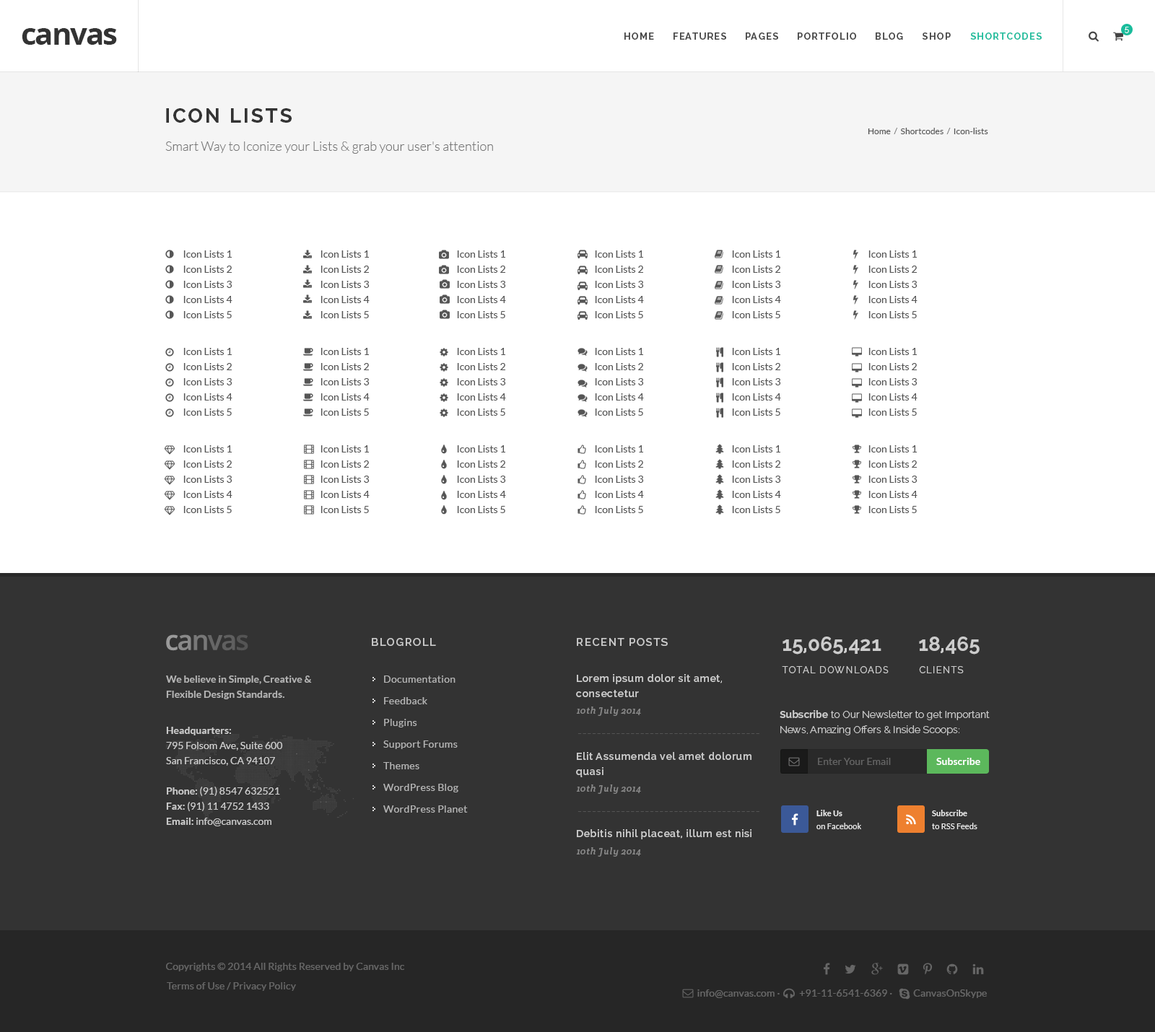
<style>
.page{position:relative;width:1155px;height:1032px;background:#ffffff}
.page>*{position:absolute;margin:0}
.t1{font:30.3px "OpenSans-Bold";letter-spacing:-0.05em;color:#333333}
.t2{font:7.9px "Raleway-Light";letter-spacing:0.1em;color:#ffffff}
.t3{font:9.4px "Raleway-Bold";letter-spacing:0.1em;color:#444444}
.t4{font:9.4px "Raleway-Bold";letter-spacing:0.1em;color:#1abc9c}
.t5{font:20.2px "Raleway-Bold";letter-spacing:0.1em;color:#333333}
.t6{font:8.7px "Lato-Regular";color:#555555}
.t7{font:8.7px "Lato-Regular";color:#777777}
.t8{font:13px "Lato-Light";color:#777777}
.t9{font:10.1px/15.2px "Lato-Regular";color:#555555}
.t10{font:10.8px "Raleway-SemiBold";letter-spacing:0.1em;color:#cccccc}
.t11{font:20.2px "Raleway-Bold";color:#cccccc}
.t12{font:10.1px/15.2px "Lato-Bold";color:#cccccc}
.t13{font:10.1px/21.7px "Lato-Regular";letter-spacing:0.025em;color:#cccccc}
.t14{font:10.1px/15.2px "Raleway-SemiBold";letter-spacing:0.05em;color:#cccccc}
.t15{font:9.4px "Raleway-Regular";letter-spacing:0.1em;color:#cacaca;text-transform:uppercase}
.t16{font:9.4px "CreteRound-Italic";letter-spacing:0.05em;color:#888888}
.t17{font:10.1px/15.2px "Raleway-Light";color:#cccccc}
.t18{font:10.1px/15.2px "Raleway-Bold";color:#cccccc}
.t19{font:10.1px/15.2px "Lato-Regular";color:#cccccc}
.t20{font:13px "Lato-Italic";letter-spacing:0.05em;color:#545454}
.t21{font:10.1px "Lato-Regular";color:#777777}
.t22{font:10.1px "Lato-Bold";color:#ffffff}
.t23{font:7.9px/13px "Lato-Regular";letter-spacing:0.01em;color:#eeeeee}
.t24{font:7.9px/13px "Lato-Bold";letter-spacing:0.01em;color:#eeeeee}
.t25{font:10.1px "Raleway-SemiBold";letter-spacing:0.05em;color:#cccccc}
.t26{font:10.1px "Lato-Regular";letter-spacing:0.01em;color:#666666}
</style>
<div class="page">
<p class="t1" style="left:22px;top:28px;width:95px;height:17px">canvas</p>
<p class="t2" style="left:1125px;top:27px;width:4px;height:6px">5</p>
<p class="t3" style="left:624px;top:32px;width:30px;height:8px">HOME</p>
<p class="t3" style="left:674px;top:32px;width:52px;height:8px">FEATURES</p>
<p class="t3" style="left:746px;top:32px;width:32px;height:8px">PAGES</p>
<p class="t3" style="left:798px;top:32px;width:58px;height:8px">PORTFOLIO</p>
<p class="t3" style="left:876px;top:32px;width:27px;height:8px">BLOG</p>
<p class="t3" style="left:923px;top:32px;width:28px;height:8px">SHOP</p>
<p class="t4" style="left:970px;top:32px;width:72px;height:8px">SHORTCODES</p>
<p class="t5" style="left:166px;top:108px;width:126px;height:15px">ICON LISTS</p>
<p class="t6" style="left:868px;top:128px;width:120px;height:6px">Home  <span class="t7">/ </span> Shortcodes  <span class="t7">/ </span> Icon-lists</p>
<p class="t8" style="left:165px;top:141px;width:328px;height:13px">Smart Way to Iconize your Lists &amp; grab your user's attention</p>
<p class="t9" style="left:183px;top:251px;width:49px;height:67px">Icon Lists 1<br>Icon Lists 2<br>Icon Lists 3<br>Icon Lists 4<br>Icon Lists 5</p>
<p class="t9" style="left:321px;top:251px;width:49px;height:67px">Icon Lists 1<br>Icon Lists 2<br>Icon Lists 3<br>Icon Lists 4<br>Icon Lists 5</p>
<p class="t9" style="left:457px;top:251px;width:49px;height:67px">Icon Lists 1<br>Icon Lists 2<br>Icon Lists 3<br>Icon Lists 4<br>Icon Lists 5</p>
<p class="t9" style="left:595px;top:251px;width:49px;height:67px">Icon Lists 1<br>Icon Lists 2<br>Icon Lists 3<br>Icon Lists 4<br>Icon Lists 5</p>
<p class="t9" style="left:732px;top:251px;width:49px;height:67px">Icon Lists 1<br>Icon Lists 2<br>Icon Lists 3<br>Icon Lists 4<br>Icon Lists 5</p>
<p class="t9" style="left:868px;top:251px;width:50px;height:67px">Icon Lists 1<br>Icon Lists 2<br>Icon Lists 3<br>Icon Lists 4<br>Icon Lists 5</p>
<p class="t9" style="left:183px;top:348px;width:49px;height:68px">Icon Lists 1<br>Icon Lists 2<br>Icon Lists 3<br>Icon Lists 4<br>Icon Lists 5</p>
<p class="t9" style="left:321px;top:348px;width:49px;height:68px">Icon Lists 1<br>Icon Lists 2<br>Icon Lists 3<br>Icon Lists 4<br>Icon Lists 5</p>
<p class="t9" style="left:457px;top:348px;width:49px;height:68px">Icon Lists 1<br>Icon Lists 2<br>Icon Lists 3<br>Icon Lists 4<br>Icon Lists 5</p>
<p class="t9" style="left:595px;top:348px;width:49px;height:68px">Icon Lists 1<br>Icon Lists 2<br>Icon Lists 3<br>Icon Lists 4<br>Icon Lists 5</p>
<p class="t9" style="left:732px;top:348px;width:49px;height:68px">Icon Lists 1<br>Icon Lists 2<br>Icon Lists 3<br>Icon Lists 4<br>Icon Lists 5</p>
<p class="t9" style="left:868px;top:348px;width:50px;height:68px">Icon Lists 1<br>Icon Lists 2<br>Icon Lists 3<br>Icon Lists 4<br>Icon Lists 5</p>
<p class="t9" style="left:183px;top:445px;width:49px;height:68px">Icon Lists 1<br>Icon Lists 2<br>Icon Lists 3<br>Icon Lists 4<br>Icon Lists 5</p>
<p class="t9" style="left:321px;top:445px;width:49px;height:68px">Icon Lists 1<br>Icon Lists 2<br>Icon Lists 3<br>Icon Lists 4<br>Icon Lists 5</p>
<p class="t9" style="left:457px;top:445px;width:49px;height:68px">Icon Lists 1<br>Icon Lists 2<br>Icon Lists 3<br>Icon Lists 4<br>Icon Lists 5</p>
<p class="t9" style="left:595px;top:445px;width:49px;height:68px">Icon Lists 1<br>Icon Lists 2<br>Icon Lists 3<br>Icon Lists 4<br>Icon Lists 5</p>
<p class="t9" style="left:732px;top:445px;width:49px;height:68px">Icon Lists 1<br>Icon Lists 2<br>Icon Lists 3<br>Icon Lists 4<br>Icon Lists 5</p>
<p class="t9" style="left:868px;top:445px;width:50px;height:68px">Icon Lists 1<br>Icon Lists 2<br>Icon Lists 3<br>Icon Lists 4<br>Icon Lists 5</p>
<p class="t10" style="left:372px;top:638px;width:64px;height:8px">BLOGROLL</p>
<p class="t10" style="left:577px;top:638px;width:91px;height:8px">RECENT POSTS</p>
<p class="t11" style="left:783px;top:637px;width:98px;height:18px">15,065,421</p>
<p class="t11" style="left:919px;top:637px;width:61px;height:18px">18,465</p>
<p class="t12" style="left:166px;top:676px;width:146px;height:24px;opacity:0.8">We believe in Simple, Creative &amp;<br>Flexible Design Standards.</p>
<p class="t13" style="left:383px;top:676px;width:85px;height:137px;opacity:0.8">Documentation<br>Feedback<br>Plugins<br>Support Forums<br>Themes<br>WordPress Blog<br>WordPress Planet</p>
<p class="t14" style="left:576px;top:674px;width:146px;height:23px">Lorem ipsum dolor sit amet,<br>consectetur</p>
<p class="t15" style="left:782px;top:666px;width:107px;height:8px">TOTAL Downloads</p>
<p class="t15" style="left:919px;top:666px;width:45px;height:8px">CLIENTS</p>
<p class="t16" style="left:576px;top:707px;width:65px;height:9px">10th July 2014</p>
<p class="t17" style="left:780px;top:710px;width:210px;height:26px"><span class="t18">Subscribe</span> to Our Newsletter to get Important<br>News, Amazing Offers &amp; Inside Scoops:</p>
<p class="t19" style="left:166px;top:727px;width:117px;height:100px"><span class="t12">Headquarters:<br></span>795 Folsom Ave, Suite 600<br>San Francisco, CA 94107<br><span class="t12"><br>Phone: </span>(91) 8547 632521<br><span class="t12">Fax: </span>(91) 11 4752 1433<br><span class="t12">Email: </span>info@canvas.com</p>
<p class="t20" style="left:578px;top:733px;width:181px;height:1px">--------------------------------------</p>
<p class="t14" style="left:576px;top:752px;width:176px;height:26px">Elit Assumenda vel amet dolorum<br>quasi</p>
<p class="t21" style="left:818px;top:758px;width:73px;height:7px;opacity:0.7">Enter Your Email</p>
<p class="t22" style="left:936px;top:758px;width:44px;height:7px">Subscribe</p>
<p class="t16" style="left:576px;top:785px;width:65px;height:9px">10th July 2014</p>
<p class="t23" style="left:816px;top:810px;width:45px;height:19px"><span class="t24">Like Us<br></span>on Facebook</p>
<p class="t23" style="left:932px;top:810px;width:45px;height:19px"><span class="t24">Subscribe<br></span>to RSS Feeds</p>
<p class="t20" style="left:578px;top:811px;width:181px;height:1px">--------------------------------------</p>
<p class="t25" style="left:577px;top:829px;width:175px;height:11px">Debitis nihil placeat, illum est nisi</p>
<p class="t16" style="left:576px;top:848px;width:65px;height:9px">10th July 2014</p>
<p class="t26" style="left:166px;top:963px;width:238px;height:9px">Copyrights © 2014 All Rights Reserved by Canvas Inc</p>
<p class="t26" style="left:167px;top:983px;width:129px;height:8px">Terms of Use / Privacy Policy</p>
<p class="t26" style="left:697px;top:990px;width:290px;height:8px">info@canvas.com ·   +91-11-6541-6369 ·        CanvasOnSkype</p>
</div>
